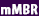
<style>
.page{position:relative;width:39px;height:16px;background:#37034d}
.page>*{position:absolute;margin:0}
.t1{font:12px "AdobeGothicStd-Bold";color:#ffffff;font-weight:bold}
</style>
<div class="page">
<p class="t1" style="left:1px;top:4px;width:37px;height:11px">mMBR</p>
</div>
